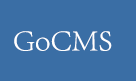
<style>
.page{position:relative;width:136px;height:81px;background:#3a6ea5}
.page>*{position:absolute;margin:0}
.t1{font:30px "AdobeSongStd-Light";color:#ffffff}
</style>
<div class="page">
<p class="t1" style="left:14px;top:31px;width:98px;height:20px">GoCMS</p>
</div>
